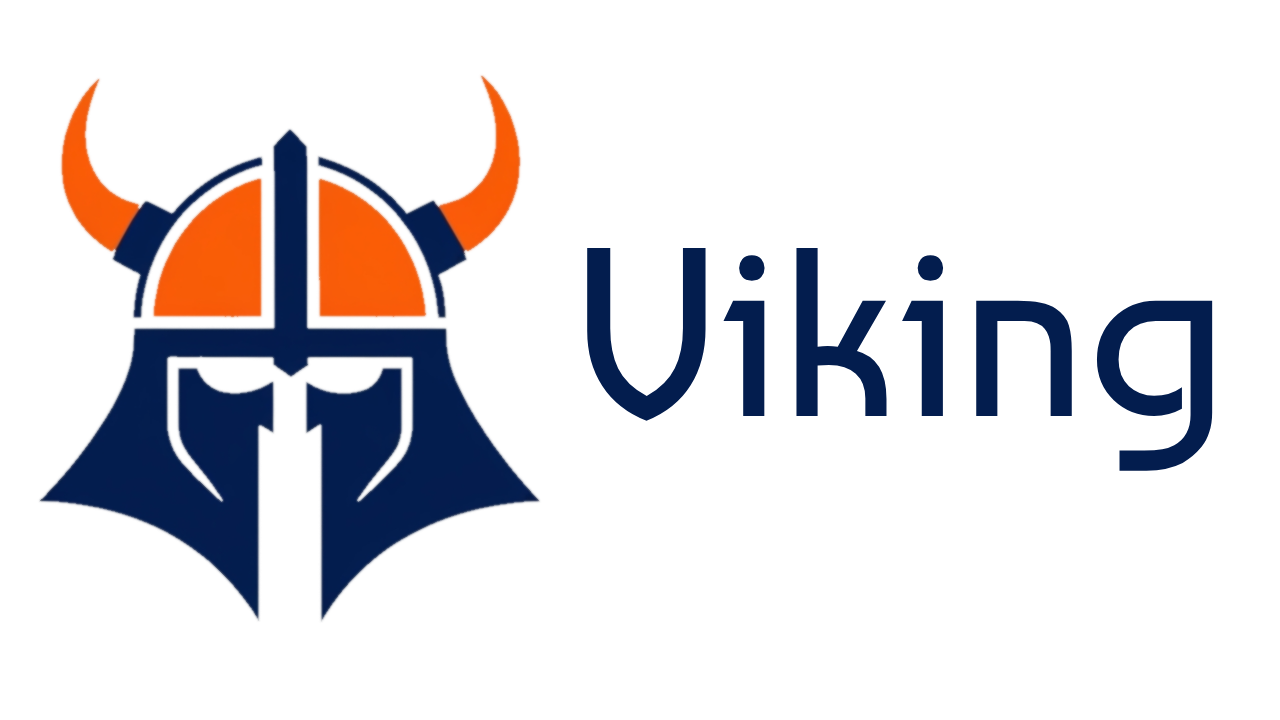
<style>
.page{position:relative;width:1280px;height:720px;background:#ffffff}
.page>*{position:absolute;margin:0}
.t1{font:240px "Baumans-Regular";color:#031d4e}
</style>
<div class="page">
<p class="t1" style="left:587px;top:248px;width:626px;height:223px">Viking</p>
</div>
